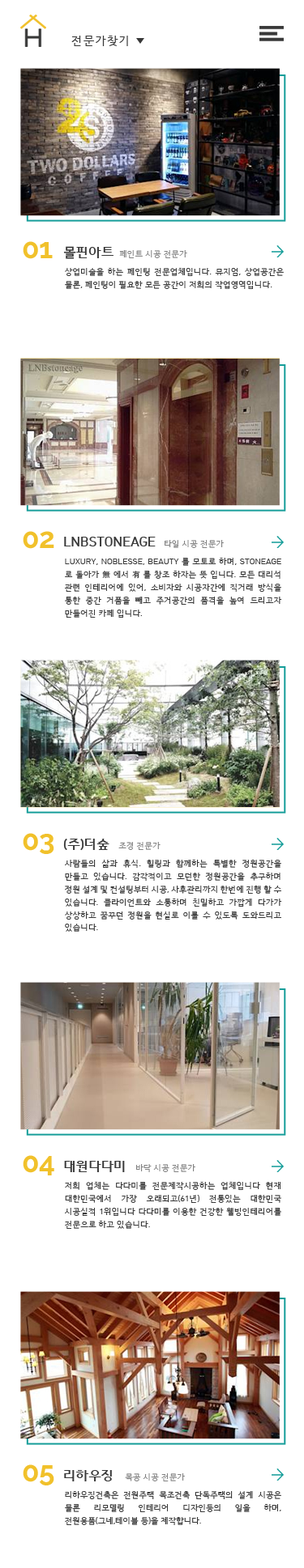
<style>
.page{position:relative;width:304px;height:1568px;background:#ffffff}
.page>*{position:absolute;margin:0}
.t1{font:11.3px "HCRDotum";letter-spacing:0.1em;color:#383838}
.t2{font:28.3px "Raleway-Bold";color:#f1c12b;text-transform:uppercase}
.t3{font:13px "HCRDotum-Bold";color:#393939;text-transform:uppercase}
.t4{font:8.1px "HCRDotum";color:#828282;text-transform:uppercase}
.t5{font:8.1px/12.8px "HCRDotum";color:#393939;text-transform:uppercase}
.t6{font:8.1px/12.8px "HCRDotum";letter-spacing:-0.02em;color:#393939;text-transform:uppercase}
</style>
<div class="page">
<p class="t1" style="left:71px;top:36px;width:57px;height:10px">전문가찾기</p>
<p class="t2" style="left:23px;top:241px;width:30px;height:18px">01</p>
<p class="t3" style="left:63px;top:246px;width:50px;height:13px">몰핀아트</p>
<p class="t4" style="left:119px;top:250px;width:68px;height:8px">페인트 시공 전문가</p>
<p class="t5" style="left:65px;top:268px;width:218px;height:21px;text-align:justify">상업미술을 하는 페인팅 전문업체입니다. 뮤지엄, 상업공간은 물론, 페인팅이 필요한 모든 공간이 저희의 작업영역입니다.</p>
<p class="t2" style="left:23px;top:531px;width:31px;height:18px">02</p>
<p class="t3" style="left:64px;top:537px;width:91px;height:9px">LNBSTONEAGE</p>
<p class="t4" style="left:164px;top:540px;width:59px;height:8px">타일 시공 전문가</p>
<p class="t5" style="left:65px;top:558px;width:217px;height:60px;text-align:justify">Luxury, Noblesse, Beauty 를 모토로 하며, STONEAGE 로 돌아가 無 에서 有 를 창조 하자는 뜻 입니다. 모든 대리석 관련 인테리어에 있어, 소비자와 시공자간에 직거래 방식을 통한 중간 거품을 빼고 주거공간의 품격을 높여 드리고자 만들어진 카페 입니다.</p>
<p class="t2" style="left:23px;top:833px;width:31px;height:21px">03</p>
<p class="t3" style="left:63px;top:839px;width:46px;height:12px">(주)더숲</p>
<p class="t4" style="left:118px;top:842px;width:42px;height:8px">조경 전문가</p>
<p class="t5" style="left:65px;top:860px;width:217px;height:72px;text-align:justify">사람들의 삶과 휴식. 힐링과 함께하는 특별한 정원공간을 만들고 있습니다. 감각적이고 모던한 정원공간을 추구하며 정원 설계 및 컨설팅부터 시공, 사후관리까지 한번에 진행 할 수 있습니다. 클라이언트와 소통하며 친밀하고 가깝게 다가가 상상하고 꿈꾸던 정원을 현실로 이룰 수 있도록 도와드리고 있습니다.</p>
<p class="t2" style="left:23px;top:1155px;width:31px;height:20px">04</p>
<p class="t3" style="left:64px;top:1161px;width:61px;height:11px">대원다다미</p>
<p class="t4" style="left:136px;top:1164px;width:59px;height:8px">바닥 시공 전문가</p>
<p class="t5" style="left:65px;top:1182px;width:216px;height:47px;text-align:justify">저희 업체는 다다미를 전문제작시공하는 업체입니다 현재 대한민국에서 가장 오래되고(61년) 전통있는 대한민국 시공실적 1위입니다 다다미를 이용한 건강한 웰빙인테리어를 전문으로 하고 있습니다.</p>
<p class="t2" style="left:23px;top:1464px;width:31px;height:21px">05</p>
<p class="t3" style="left:64px;top:1470px;width:48px;height:11px">리하우징</p>
<p class="t4" style="left:125px;top:1473px;width:60px;height:8px">목공 시공 전문가</p>
<p class="t6" style="left:65px;top:1491px;width:216px;height:34px;text-align:justify">리하우징건축은 전원주택 목조건축 단독주택의 설계 시공은 물론 리모델링 인테리어 디자인등의 일을 하며, 전원용품(그네,테이블 등)을 제작합니다.</p>
</div>
